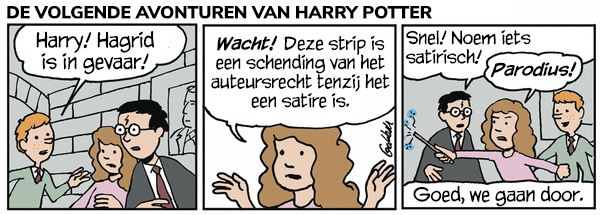
<style>
.page{position:relative;width:600px;height:215px;background:#ffffff}
.page>*{position:absolute;margin:0}
.t1{font:17.9px "NunitoSans-Black";letter-spacing:-0.02em;color:#000000;text-transform:uppercase}
.t2{font:15.9px "CCYadaYadaYada-Regular";letter-spacing:-0.02em;color:#000000}
.t3{font:17.9px "CCYadaYadaYada-Regular";letter-spacing:-0.02em;color:#000000}
.t4{font:15.9px "CCYadaYadaYada-BoldItalic";letter-spacing:-0.02em;color:#000000}
.t5{font:16.9px "CCYadaYadaYada-Regular";letter-spacing:-0.02em;color:#000000}
</style>
<div class="page">
<p class="t1" style="left:7px;top:5px;width:425px;height:14px">De volgende avonturen van Harry Potter</p>
<p class="t2" style="left:406px;top:30px;width:125px;height:34px">Snel! Noem iets<br>satirisch!</p>
<p class="t3" style="left:36px;top:31px;width:119px;height:44px;text-align:center">Harry! Hagrid<br>is in gevaar!</p>
<p class="t2" style="left:211px;top:35px;width:179px;height:73px;text-align:center"><span class="t4">Wacht! </span>Deze strip is<br>een schending van het<br>auteursrecht tenzij het<br>een satire is.</p>
<p class="t4" style="left:490px;top:61px;width:87px;height:17px">Parodius!</p>
<p class="t5" style="left:413px;top:186px;width:170px;height:21px">Goed, we gaan door.</p>
</div>
